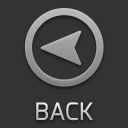
<style>
.page{position:relative;width:128px;height:128px;background:#333333}
.page>*{position:absolute;margin:0}
.t1{font:24px "Exo-Medium";text-transform:uppercase}
</style>
<div class="page">
<p class="t1" style="left:36px;top:102px;width:57px;height:19px">Back</p>
</div>
